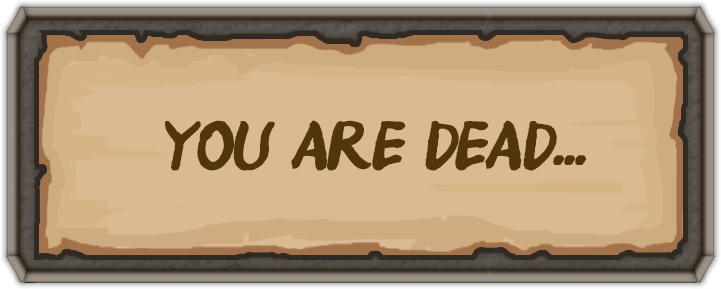
<style>
.page{position:relative;width:721px;height:289px;background:#daba91}
.page>*{position:absolute;margin:0}
.t1{font:72px "SangSangFlowerRoad";letter-spacing:-0.025em;color:#503609;text-transform:uppercase;font-weight:bold;font-style:italic}
</style>
<div class="page">
<p class="t1" style="left:165px;top:120px;width:422px;height:51px">YOU ARE DEAD...</p>
</div>
